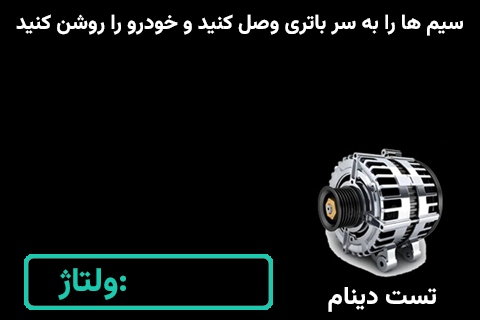
<style>
.page{position:relative;width:480px;height:320px;background:#000000}
.page>*{position:absolute;margin:0}
.t1{font:20.7px "Vazirmatn-ExtraBold";color:#ffffff}
.t2{font:33.2px "Vazirmatn-ExtraBold";color:#1ac9ae}
.t3{font:24.8px "Vazirmatn-ExtraBold";color:#ffffff}
</style>
<div class="page">
<p class="t1" style="left:16px;top:14px;width:447px;height:22px">سیم ها را به سر باتری وصل کنید و خودرو را روشن کنید</p>
<p class="t2" style="left:58px;top:268px;width:68px;height:32px">ولتاژ:</p>
<p class="t3" style="left:328px;top:287px;width:109px;height:25px">تست دینام</p>
</div>
